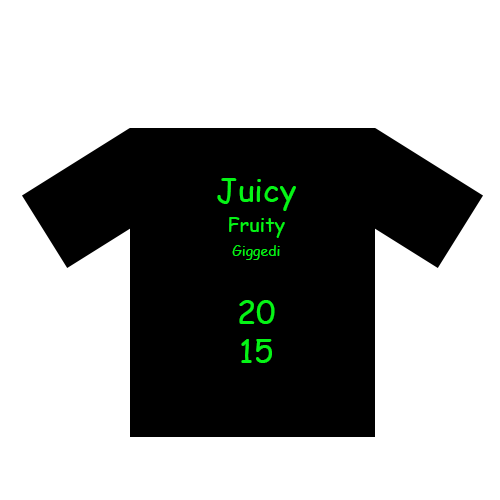
<style>
.page{position:relative;width:500px;height:500px;background:#ffffff}
.page>*{position:absolute;margin:0}
.t1{font:14px/24px "ComicSansMS";color:#05f416}
.t2{font:32px/30px "ComicSansMS";color:#05f416}
.t3{font:20px/30px "ComicSansMS";color:#05f416}
.t4{font:32px "ComicSansMS";color:#05f416}
</style>
<div class="page">
<p class="t1" style="left:217px;top:178px;width:79px;height:185px;text-align:center"><span class="t2">Juicy<br></span><span class="t3">Fruity<br></span>Giggedi<br><br><span class="t4">20<br>15</span></p>
</div>
